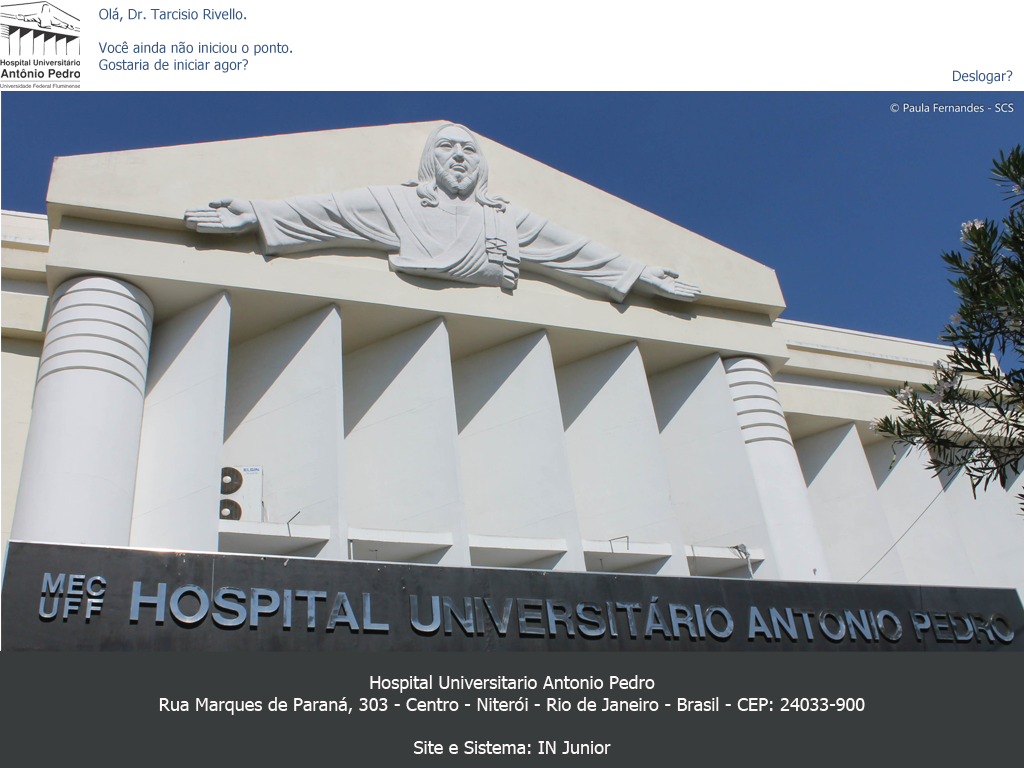
<style>
.page{position:relative;width:1024px;height:768px}
.page>*{position:absolute;margin:0}
.t1{font:14px "Tahoma";color:#375587}
.t2{font:18px "Tahoma";color:#fcf8f8}
</style>
<div class="page">
<p class="t1" style="left:98px;top:7px;width:194px;height:66px">Olá, Dr. Tarcisio Rivello.<br><br>Você ainda não iniciou o ponto.<br>Gostaria de iniciar agor?</p>
<p class="t1" style="left:953px;top:70px;width:60px;height:14px">Deslogar?</p>
<p class="t2" style="left:159px;top:675px;width:706px;height:79px;text-align:center">Hospital Universitario Antonio Pedro<br>Rua Marques de Paraná, 303 - Centro - Niterói - Rio de Janeiro - Brasil - CEP: 24033-900<br><br>Site e Sistema: IN Junior</p>
</div>
